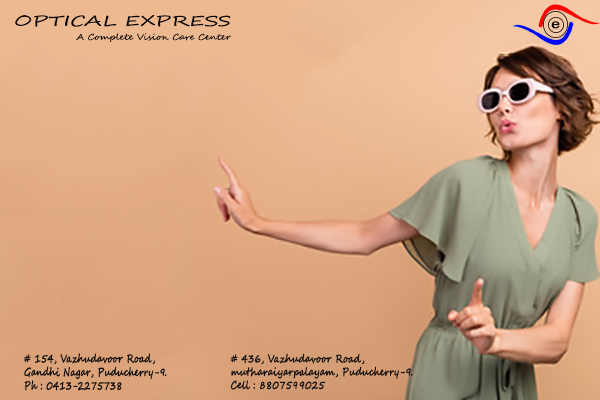
<style>
.page{position:relative;width:600px;height:400px}
.page>*{position:absolute;margin:0}
.t1{font:14.2px "SegoeScript";color:#080606;scale:1.48 1}
.t2{font:13.1px "MicrosoftSansSerif";color:#080606;scale:1.2 1}
.t3{font:8.4px "SegoeScript";color:#080606;scale:1.12 1}
.t4{font:11.3px "SegoeScript";color:#100f0e;font-weight:bold;scale:0.75 1}
.t5{font:11px "SegoeScript";color:#121110;font-weight:bold;scale:0.79 1}
</style>
<div class="page">
<p class="t1" style="left:15px;top:15px;width:216px;height:12px">OPTICAL EXPRESS</p>
<p class="t2" style="left:551px;top:21px;width:9px;height:8px">e</p>
<p class="t3" style="left:76px;top:33px;width:155px;height:9px">A Complete Vision Care Center</p>
<p class="t4" style="left:24px;top:353px;width:143px;height:38px"># 154, Vazhudavoor Road,<br>Gandhi Nagar, Puducherry-9.<br>Ph : 0413-2275738</p>
<p class="t5" style="left:230px;top:353px;width:183px;height:37px"># 436, Vazhudavoor Road,<br>mutharaiyarpalayam, Puducherry-9.<br>Cell : 8807599025</p>
</div>
